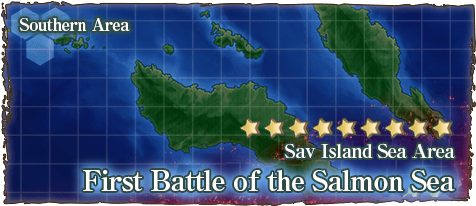
<style>
.page{position:relative;width:476px;height:206px}
.page>*{position:absolute;margin:0}
.t1{font:17px "RyuminPro-ExBold";letter-spacing:-0.04em;color:#ffffff}
.t2{font:19px "RyuminPro-ExBold";letter-spacing:-0.04em;color:#ffffff}
.t3{font:28px "RyuminPro-ExBold";letter-spacing:-0.04em;color:#ffffff}
</style>
<div class="page">
<p class="t1" style="left:19px;top:18px;width:111px;height:13px">Southern Area</p>
<p class="t2" style="left:285px;top:143px;width:170px;height:16px">Sav Island Sea Area</p>
<p class="t3" style="left:83px;top:170px;width:372px;height:22px">First Battle of the Salmon Sea</p>
</div>
